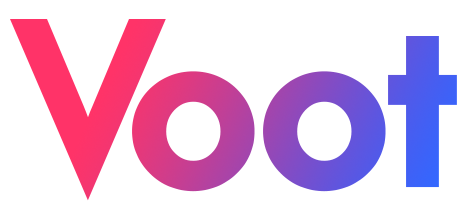
<style>
.page{position:relative;width:467px;height:209px;background:#ffffff}
.page>*{position:absolute;margin:0}
.t1{font:229.2px "MotorOil1937M54";letter-spacing:-0.05em}
</style>
<div class="page">
<p class="t1" style="left:10px;top:19px;width:447px;height:182px">Voot</p>
</div>
